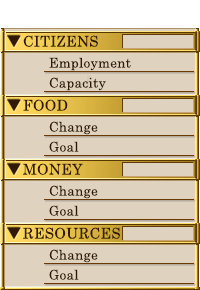
<style>
.page{position:relative;width:200px;height:290px;background:#dfd3c0}
.page>*{position:absolute;margin:0}
.t1{font:14.7px "CenturySchoolbook";letter-spacing:0.025em;color:#321a02}
.t2{font:13.3px "CenturySchoolbook";letter-spacing:0.025em;color:#321a02}
</style>
<div class="page">
<p class="t1" style="left:23px;top:35px;width:75px;height:12px">CITIZENS</p>
<p class="t2" style="left:49px;top:57px;width:82px;height:14px">Employment</p>
<p class="t2" style="left:49px;top:77px;width:57px;height:14px">Capacity</p>
<p class="t1" style="left:23px;top:99px;width:45px;height:12px">FOOD</p>
<p class="t2" style="left:49px;top:121px;width:49px;height:14px">Change</p>
<p class="t2" style="left:49px;top:141px;width:30px;height:11px">Goal</p>
<p class="t1" style="left:23px;top:163px;width:60px;height:12px">MONEY</p>
<p class="t2" style="left:49px;top:185px;width:49px;height:14px">Change</p>
<p class="t2" style="left:49px;top:205px;width:30px;height:11px">Goal</p>
<p class="t1" style="left:23px;top:227px;width:97px;height:12px">RESOURCES</p>
<p class="t2" style="left:49px;top:249px;width:49px;height:14px">Change</p>
<p class="t2" style="left:49px;top:269px;width:30px;height:11px">Goal</p>
</div>
